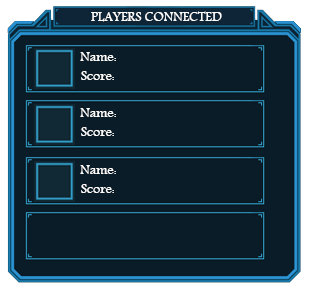
<style>
.page{position:relative;width:309px;height:289px;background:#0a1c27}
.page>*{position:absolute;margin:0}
.t1{font:14px "Andalus";color:#ffffff}
</style>
<div class="page">
<p class="t1" style="left:91px;top:11px;width:131px;height:11px">PLAYERS CONNECTED</p>
<p class="t1" style="left:80px;top:52px;width:36px;height:9px">Name:</p>
<p class="t1" style="left:81px;top:71px;width:33px;height:9px">Score:</p>
<p class="t1" style="left:80px;top:108px;width:36px;height:9px">Name:</p>
<p class="t1" style="left:81px;top:127px;width:33px;height:9px">Score:</p>
<p class="t1" style="left:80px;top:165px;width:36px;height:9px">Name:</p>
<p class="t1" style="left:81px;top:184px;width:33px;height:9px">Score:</p>
</div>
